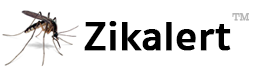
<style>
.page{position:relative;width:255px;height:75px;background:#ffffff}
.page>*{position:absolute;margin:0}
.t1{font:42px "SukhumvitSet-SemiBold";color:#000000;font-weight:bold}
</style>
<div class="page">
<p class="t1" style="left:84px;top:21px;width:147px;height:30px">Zikalert</p>
</div>
